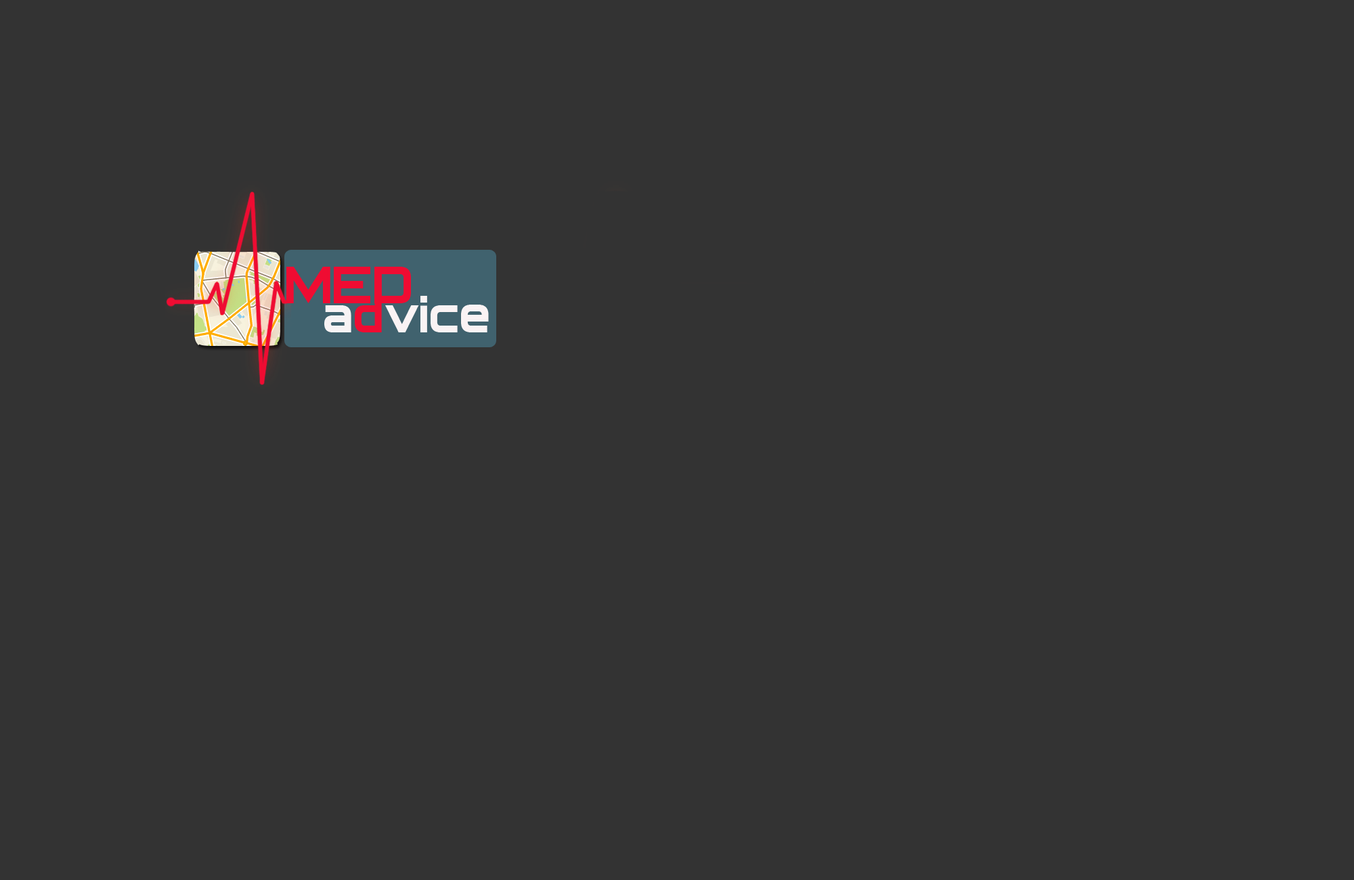
<style>
.page{position:relative;width:1354px;height:880px;background:#333333}
.page>*{position:absolute;margin:0}
.t1{font:60.9px "Archangelsk";color:#ef0c32}
.t2{font:60.9px "Archangelsk";color:#faf3f4}
.t3{font:60.9px "Archangelsk";color:#f7f3f4}
</style>
<div class="page">
<p class="t1" style="left:286px;top:267px;width:125px;height:36px">MED</p>
<p class="t2" style="left:324px;top:296px;width:165px;height:37px"><span class="t3">a</span><span class="t1">d</span>vice</p>
</div>
